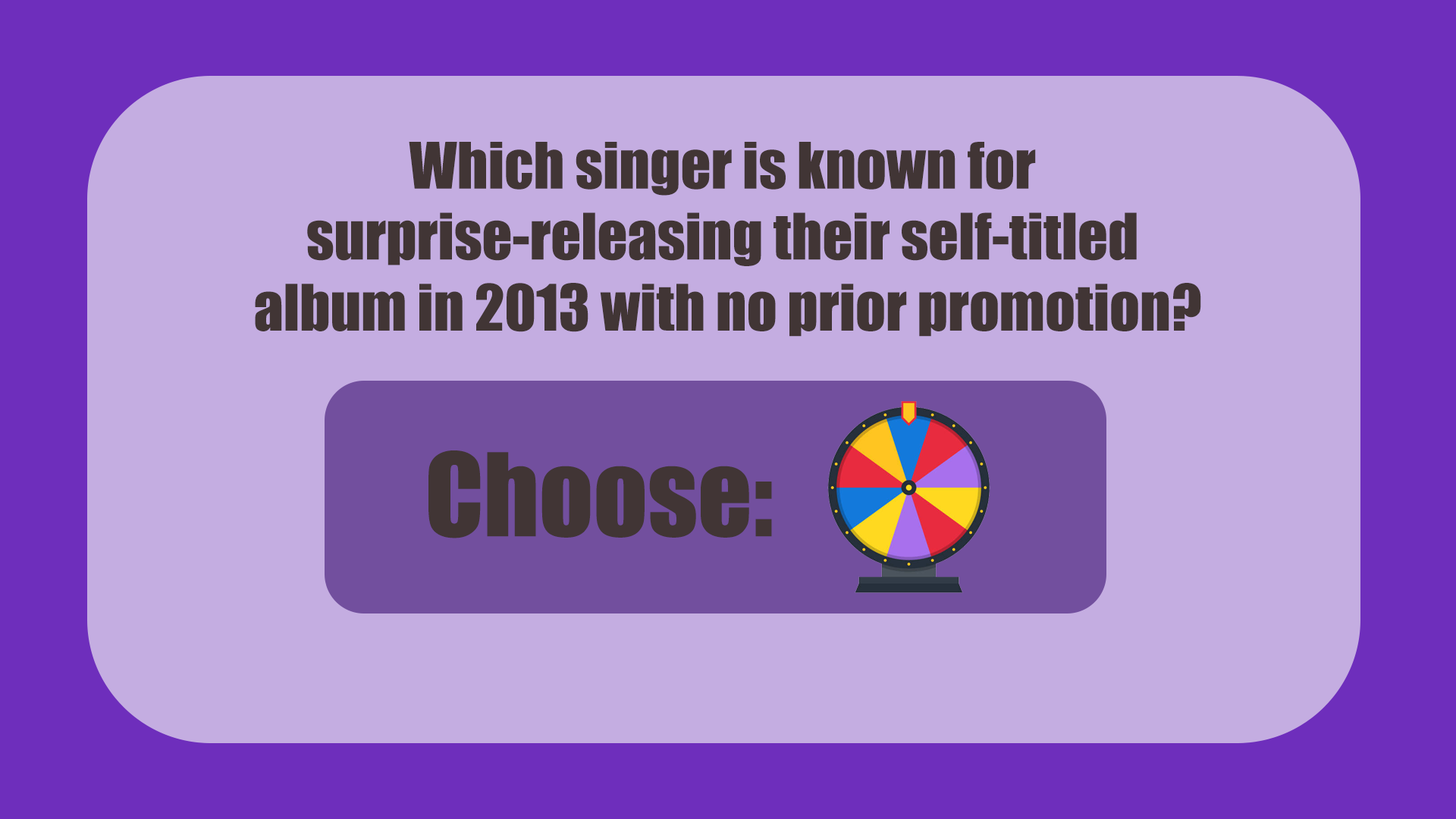
<style>
.page{position:relative;width:1456px;height:819px;background:#c4ade1}
.page>*{position:absolute;margin:0}
.t1{font:59.1px "Impact";color:#413535}
.t2{font:106.2px "Impact";color:#413535}
</style>
<div class="page">
<p class="t1" style="left:255px;top:142px;width:946px;height:195px;text-align:center">Which singer is known for <br>surprise-releasing their self-titled <br>album in 2013 with no prior promotion?</p>
<p class="t2" style="left:428px;top:450px;width:344px;height:88px">Choose:</p>
</div>
